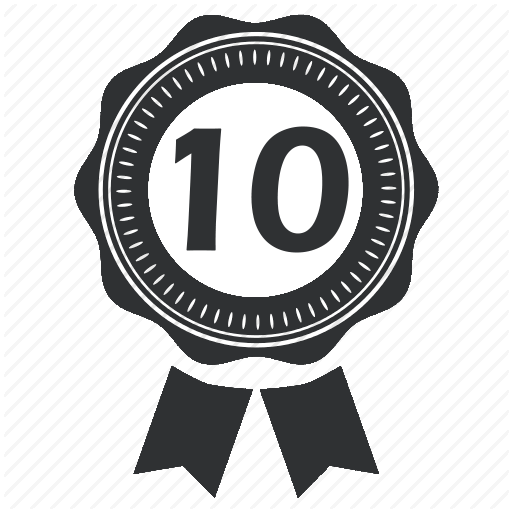
<style>
.page{position:relative;width:512px;height:512px;background:#ffffff}
.page>*{position:absolute;margin:0}
.t1{font:182.3px "ErasITC-Demi";letter-spacing:-0.075em;color:#2f3133;font-weight:bold}
</style>
<div class="page">
<p class="t1" style="left:174px;top:126px;width:175px;height:127px">10</p>
</div>
